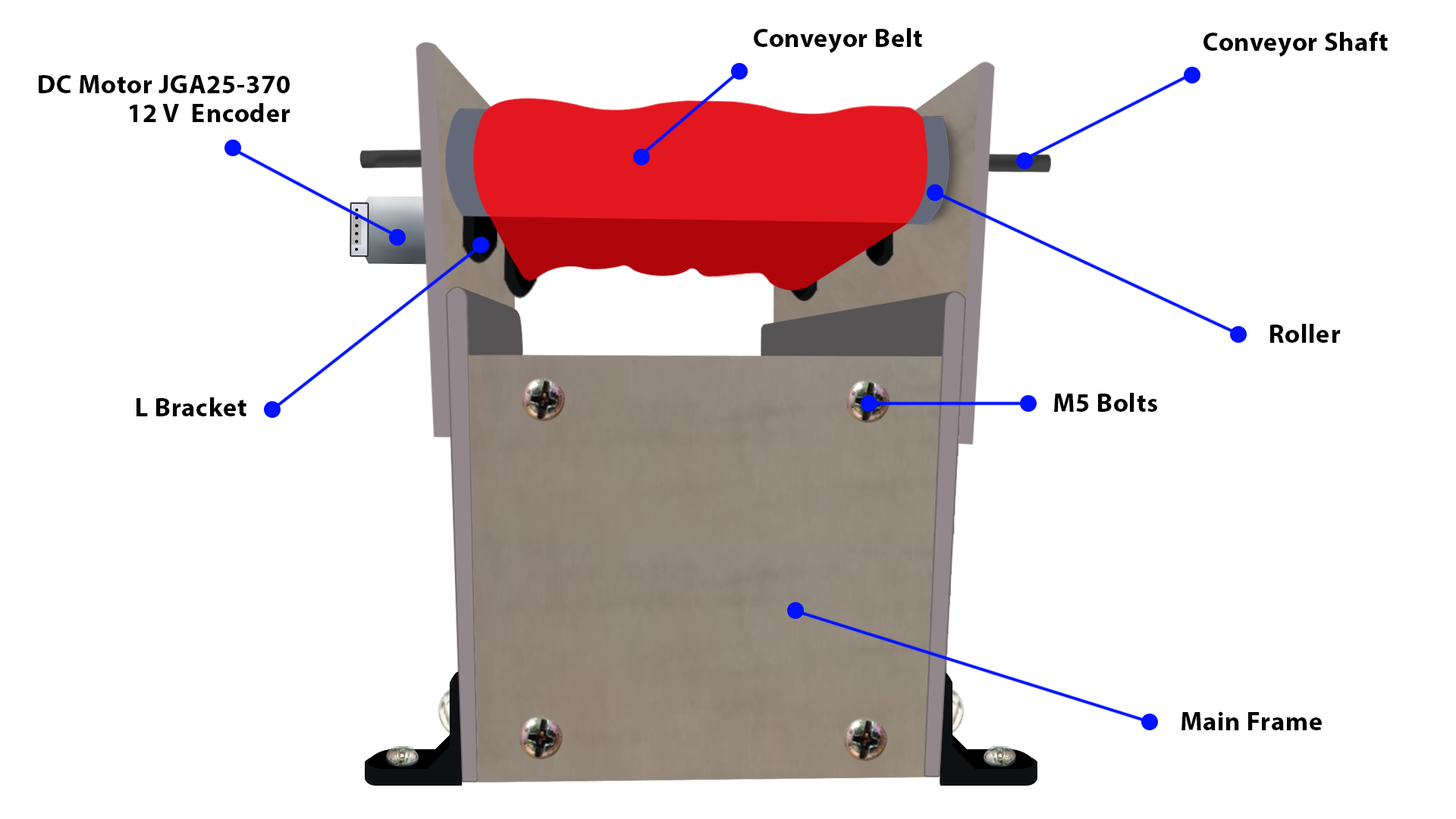
<style>
.page{position:relative;width:1456px;height:819px;background:#ffffff}
.page>*{position:absolute;margin:0}
.t1{font:26.3px "MyriadPro-Bold";letter-spacing:0.02em;color:#000000}
.t2{font:26.3px/28.4px "MyriadPro-Bold";letter-spacing:0.02em;color:#000000}
</style>
<div class="page">
<p class="t1" style="left:754px;top:28px;width:168px;height:25px">Conveyor Belt</p>
<p class="t1" style="left:1203px;top:32px;width:185px;height:25px">Conveyor Shaft</p>
<p class="t2" style="left:39px;top:75px;width:251px;height:47px;text-align:right">DC Motor JGA25-370<br>12 V  Encoder</p>
<p class="t1" style="left:1270px;top:324px;width:71px;height:19px">Roller</p>
<p class="t1" style="left:136px;top:397px;width:110px;height:19px">L Bracket</p>
<p class="t1" style="left:1054px;top:393px;width:103px;height:19px">M5 Bolts</p>
<p class="t1" style="left:1181px;top:711px;width:141px;height:19px">Main Frame</p>
</div>
